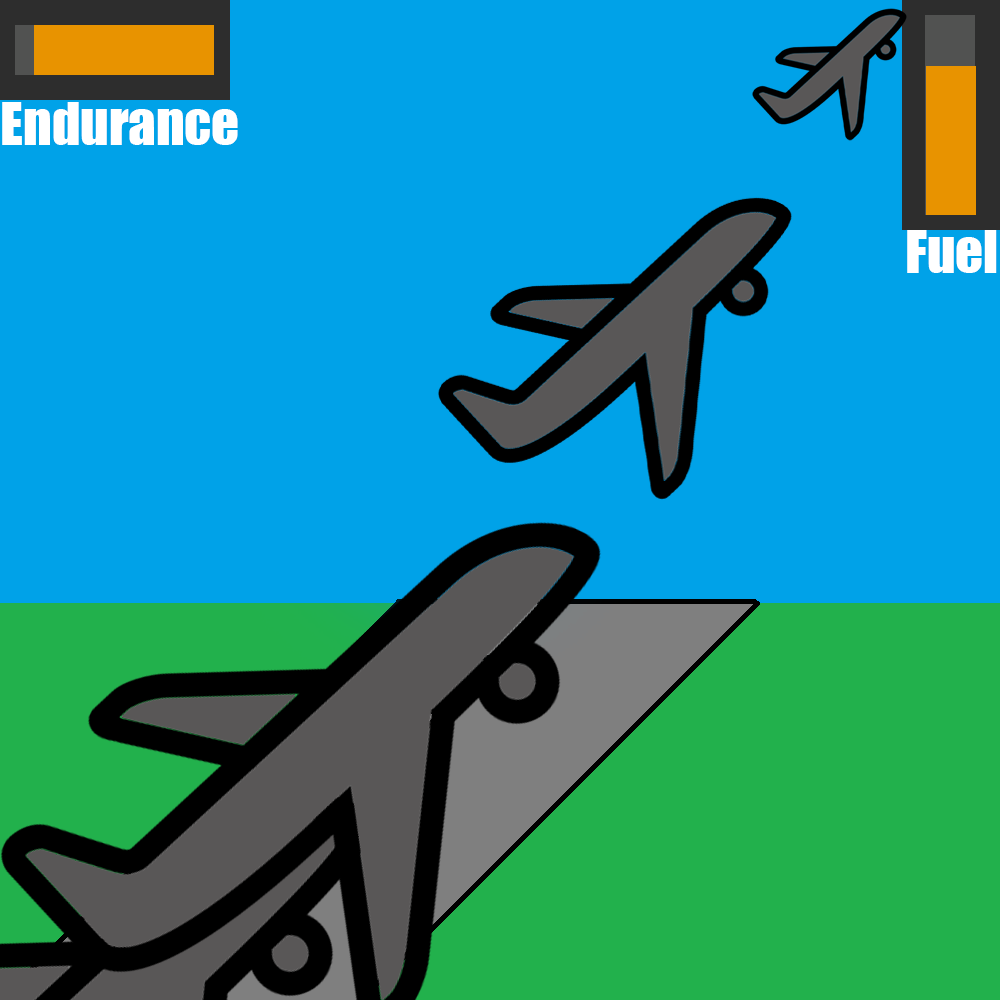
<style>
.page{position:relative;width:1000px;height:1000px;background:#00a2e8}
.page>*{position:absolute;margin:0}
.t1{font:54.7px "Impact";color:#ffffff}
</style>
<div class="page">
<p class="t1" style="left:2px;top:102px;width:236px;height:43px">Endurance</p>
<p class="t1" style="left:907px;top:230px;width:90px;height:43px">Fuel</p>
</div>
